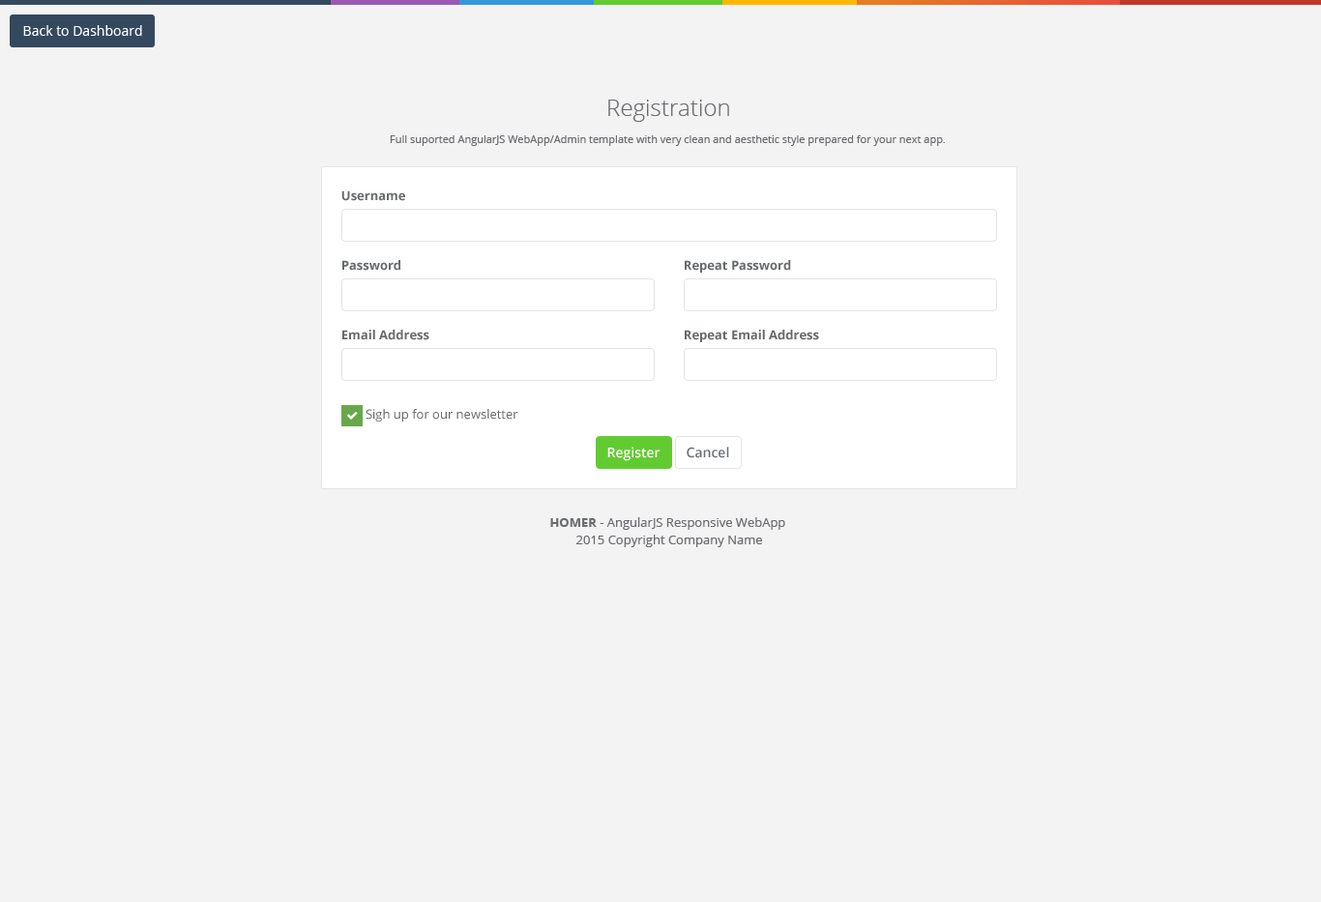
<style>
.page{position:relative;width:1321px;height:902px;background:#f3f3f4}
.page>*{position:absolute;margin:0}
.t1{font:13.5px "OpenSans";color:#ffffff}
.t2{font:23.2px "OpenSans-Light";color:#6a6c6f}
.t3{font:10.6px "OpenSans";color:#6a6c6f}
.t4{font:12.6px "OpenSans-Bold";color:#676a6c}
.t5{font:12.6px "OpenSans";color:#676a6c}
.t6{font:13.5px "OpenSans-Semibold";color:#ffffff}
.t7{font:13.5px "OpenSans-Semibold";color:#6b7178}
.t8{font:12.6px/17.4px "OpenSans";color:#6a6c6f}
.t9{font:12.6px/17.4px "OpenSans-Bold";color:#6a6c6f}
</style>
<div class="page">
<p class="t1" style="left:23px;top:25px;width:119px;height:11px">Back to Dashboard</p>
<p class="t2" style="left:608px;top:100px;width:121px;height:22px">Registration</p>
<p class="t3" style="left:390px;top:135px;width:555px;height:11px">Full suported AngularJS WebApp/Admin template with very clean and aesthetic style prepared for your next app.</p>
<p class="t4" style="left:341px;top:191px;width:64px;height:10px">Username</p>
<p class="t4" style="left:342px;top:260px;width:58px;height:11px">Password</p>
<p class="t4" style="left:685px;top:260px;width:106px;height:13px">Repeat Password</p>
<p class="t4" style="left:342px;top:330px;width:87px;height:10px">Email Address</p>
<p class="t4" style="left:685px;top:330px;width:134px;height:12px">Repeat Email Address</p>
<p class="t5" style="left:366px;top:409px;width:152px;height:13px">Sigh up for our newsletter</p>
<p class="t6" style="left:607px;top:447px;width:54px;height:14px">Register</p>
<p class="t7" style="left:687px;top:447px;width:42px;height:11px">Cancel</p>
<p class="t8" style="left:550px;top:517px;width:235px;height:30px;text-align:center"><span class="t9">HOMER</span> - AngularJS Responsive WebApp <br>2015 Copyright Company Name</p>
</div>
